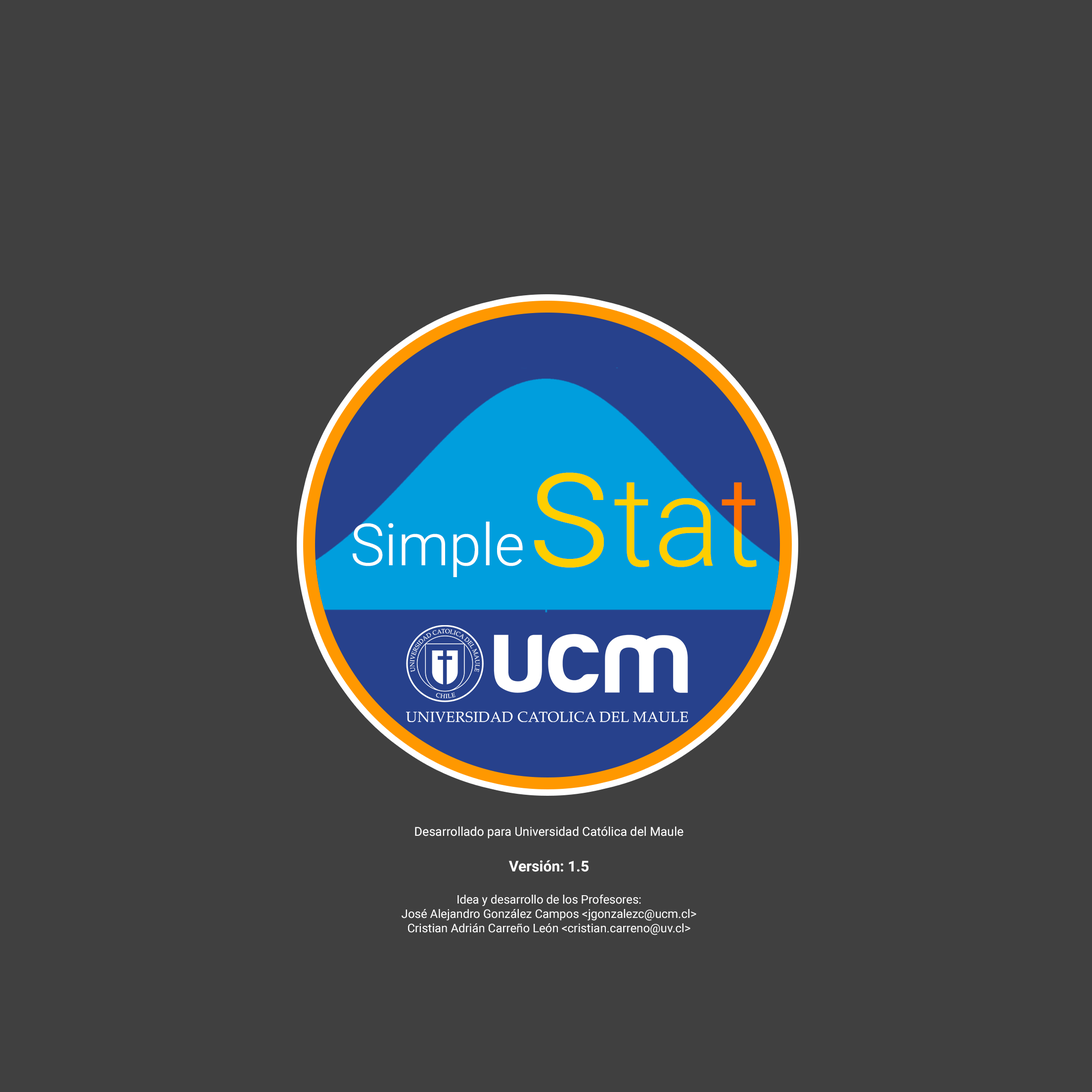
<style>
.page{position:relative;width:1092px;height:1092px;background:#404040}
.page>*{position:absolute;margin:0}
.t1{font:11.9px "Roboto-Regular";color:#ffffff}
.t2{font:12.4px "Roboto-Regular";color:#ffffff}
.t3{font:14.8px "Roboto-Bold";color:#ffffff}
</style>
<div class="page">
<p class="t1" style="left:402px;top:826px;width:294px;height:109px;text-align:center"><span class="t2">Desarrollado para Universidad Católica del Maule<br><br></span><span class="t3">Versión: 1.5<br><br></span>Idea y desarrollo de los Profesores:<br>José Alejandro González Campos &lt;jgonzalezc@ucm.cl&gt;<br>Cristian Adrián Carreño León &lt;cristian.carreno@uv.cl&gt;</p>
</div>
